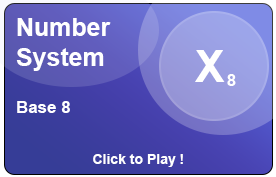
<style>
.page{position:relative;width:276px;height:177px}
.page>*{position:absolute;margin:0}
.t1{font:25px "Arial-BoldMT";color:#ffffff}
.t2{font:44px "Arial-BoldMT";color:#ffffff}
.t3{font:16.5px "Arial-BoldMT";color:#ffffff}
.t4{font:17px "Arial-BoldMT";color:#ffffff}
.t5{font:14px "Arial-BoldMT";color:#ffffff}
</style>
<div class="page">
<p class="t1" style="left:16px;top:18px;width:95px;height:53px">Number<br>System</p>
<p class="t2" style="left:195px;top:50px;width:30px;height:32px">X</p>
<p class="t3" style="left:227px;top:74px;width:9px;height:12px">8</p>
<p class="t4" style="left:17px;top:101px;width:53px;height:12px">Base 8</p>
<p class="t5" style="left:93px;top:154px;width:90px;height:13px">Click to Play !</p>
</div>
